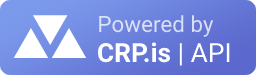
<style>
.page{position:relative;width:256px;height:75px}
.page>*{position:absolute;margin:0}
.t1{font:22.4px "Roboto-Regular";color:#dadff6}
.t2{font:26.4px "Roboto-Bold";color:#ffffff}
.t3{font:26.4px "Roboto-Regular";color:#ffffff}
</style>
<div class="page">
<p class="t1" style="left:99px;top:15px;width:115px;height:22px">Powered by</p>
<p class="t2" style="left:98px;top:42px;width:132px;height:24px">CRP.is <span class="t3">| API</span></p>
</div>
